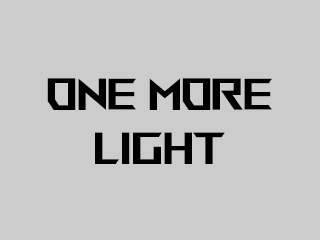
<style>
.page{position:relative;width:320px;height:240px;background:#cccccc}
.page>*{position:absolute;margin:0}
.t1{font:45px "ROGFonts-Regular";color:#000000;scale:0.78 1}
</style>
<div class="page">
<p class="t1" style="left:47px;top:78px;width:225px;height:86px;text-align:center">One more<br>light</p>
</div>
